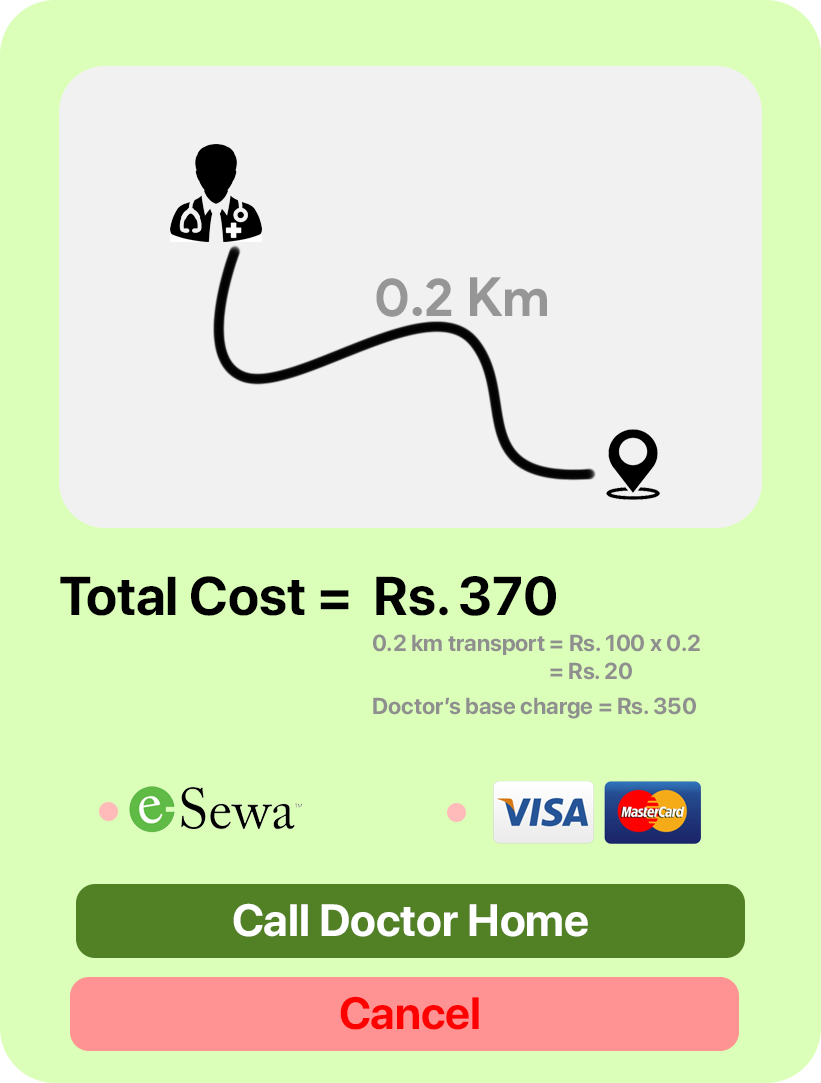
<style>
.page{position:relative;width:821px;height:1083px;background:#dbffb8}
.page>*{position:absolute;margin:0}
.t1{font:54.2px "ProductSans-Bold";color:#969696}
.t2{font:54.2px "SFProDisplay-Bold";color:#000000}
.t3{font:22.9px "SFProDisplay-Bold";color:#8f8f8f}
.t4{font:44.9px "SFProDisplay-Bold";color:#ffffff}
.t5{font:44.9px "SFProDisplay-Bold";color:#ff0000}
</style>
<div class="page">
<p class="t1" style="left:376px;top:277px;width:171px;height:40px">0.2 Km</p>
<p class="t2" style="left:60px;top:576px;width:289px;height:40px">Total Cost =</p>
<p class="t2" style="left:376px;top:576px;width:180px;height:40px">Rs. 370</p>
<p class="t3" style="left:373px;top:634px;width:327px;height:46px">0.2 km transport = Rs. 100 x 0.2<br>             = Rs. 20</p>
<p class="t3" style="left:373px;top:697px;width:323px;height:22px">Doctor’s base charge = Rs. 350</p>
<p class="t4" style="left:233px;top:903px;width:355px;height:34px">Call Doctor Home</p>
<p class="t5" style="left:340px;top:996px;width:139px;height:34px">Cancel</p>
</div>
